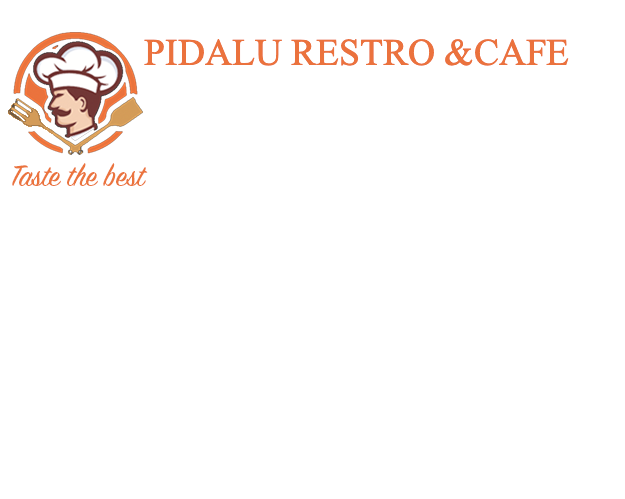
<style>
.page{position:relative;width:625px;height:499px;background:#ffffff}
.page>*{position:absolute;margin:0}
.t1{font:37.5px "TimesNewRomanPSMT";color:#eb723d}
.t2{font:33.3px "SignPainter-HouseScript";color:#eb743d}
</style>
<div class="page">
<p class="t1" style="left:144px;top:39px;width:425px;height:27px">PIDALU RESTRO &amp;CAFE</p>
<p class="t2" style="left:12px;top:163px;width:136px;height:23px">Taste the best</p>
</div>
